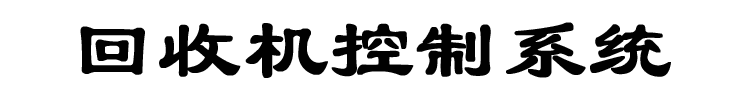
<style>
.page{position:relative;width:750px;height:100px;background:#ffffff}
.page>*{position:absolute;margin:0}
.t1{font:84px "LiSu";color:#010101;font-weight:bold}
</style>
<div class="page">
<p class="t1" style="left:80px;top:22px;width:591px;height:56px">回收机控制系统</p>
</div>
